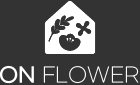
<style>
.page{position:relative;width:140px;height:85px;background:#333333}
.page>*{position:absolute;margin:0}
.t1{font:20.3px "GmarketSansLight";color:#ffffff}
.t2{font:20.3px "GmarketSansMedium";color:#ffffff}
</style>
<div class="page">
<p class="t1" style="left:0px;top:65px;width:139px;height:19px"><span class="t2">ON</span> FLOWER</p>
</div>
